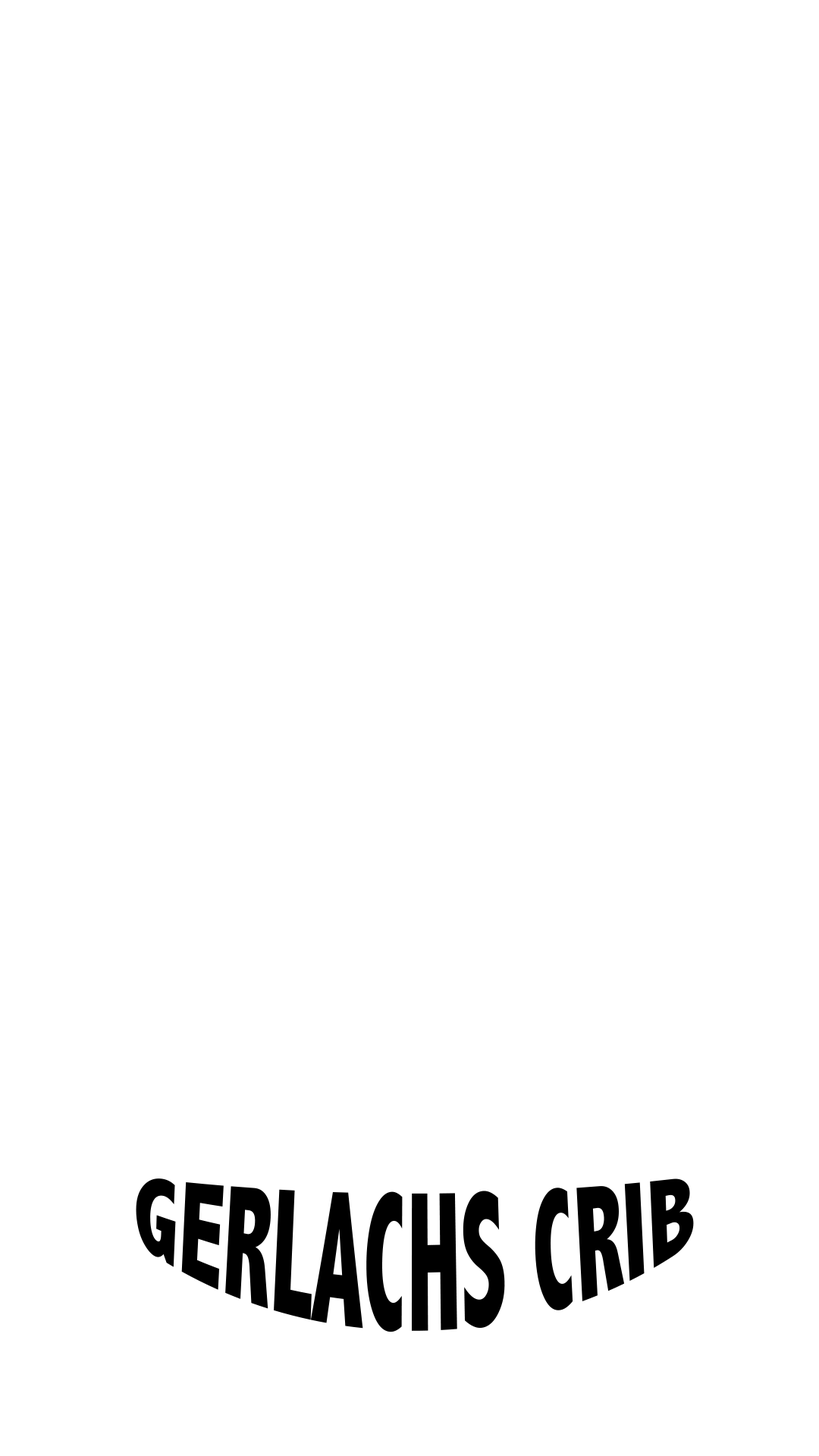
<style>
.page{position:relative;width:819px;height:1456px;background:#ffffff}
.page>*{position:absolute;margin:0}
.t1{font:94.8px "AbadiMT-CondensedExtraBold";letter-spacing:0.01em;color:#000000;text-transform:uppercase}
</style>
<div class="page">
<p class="t1" style="left:136px;top:1178px;width:558px;height:154px">GERLACHS CRIB</p>
</div>
